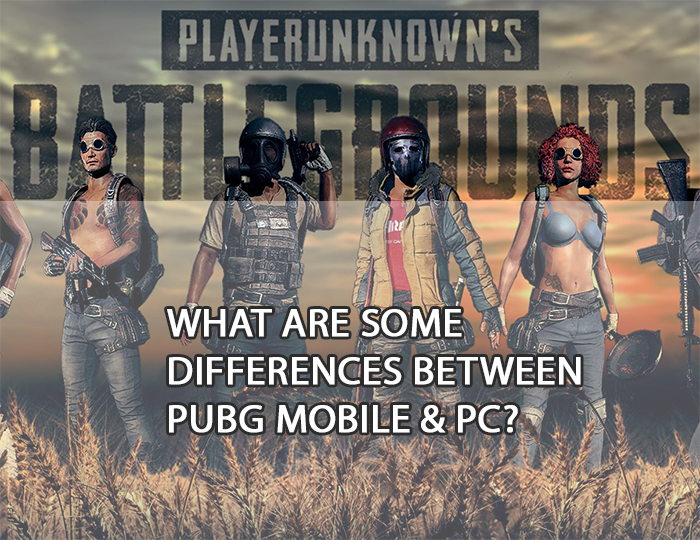
<style>
.page{position:relative;width:700px;height:540px}
.page>*{position:absolute;margin:0}
.t1{font:40px "MyriadPro-Regular";color:#ffffff;font-weight:bold}
</style>
<div class="page">
<p class="t1" style="left:167px;top:309px;width:414px;height:124px">WHAT ARE SOME<br>DIFFERENCES BETWEEN<br>PUBG MOBILE &amp; PC?</p>
</div>
